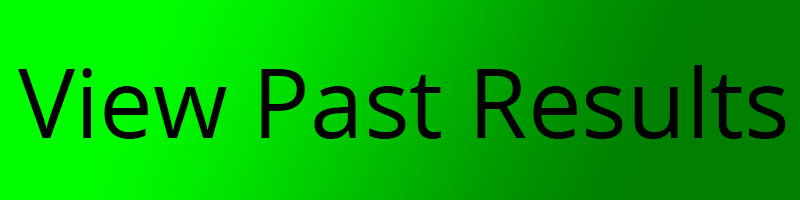
<style>
.page{position:relative;width:800px;height:200px}
.page>*{position:absolute;margin:0}
.t1{font:96px "OpenSans-Regular";color:#000000}
</style>
<div class="page">
<p class="t1" style="left:18px;top:65px;width:768px;height:74px">View Past Results</p>
</div>
